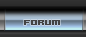
<style>
.page{position:relative;width:86px;height:37px}
.page>*{position:absolute;margin:0}
.t1{font:8px "Hooge0553";color:#434343;font-weight:bold}
</style>
<div class="page">
<p class="t1" style="left:24px;top:20px;width:36px;height:5px">FORUM</p>
</div>
